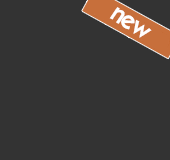
<style>
.page{position:relative;width:170px;height:160px;background:#333333}
.page>*{position:absolute;margin:0}
.t1{font:24px "ELEGANCE";color:#ffffff}
</style>
<div class="page">
<p class="t1" style="left:109px;top:7px;width:43px;height:31px;rotate:34deg">new</p>
</div>
